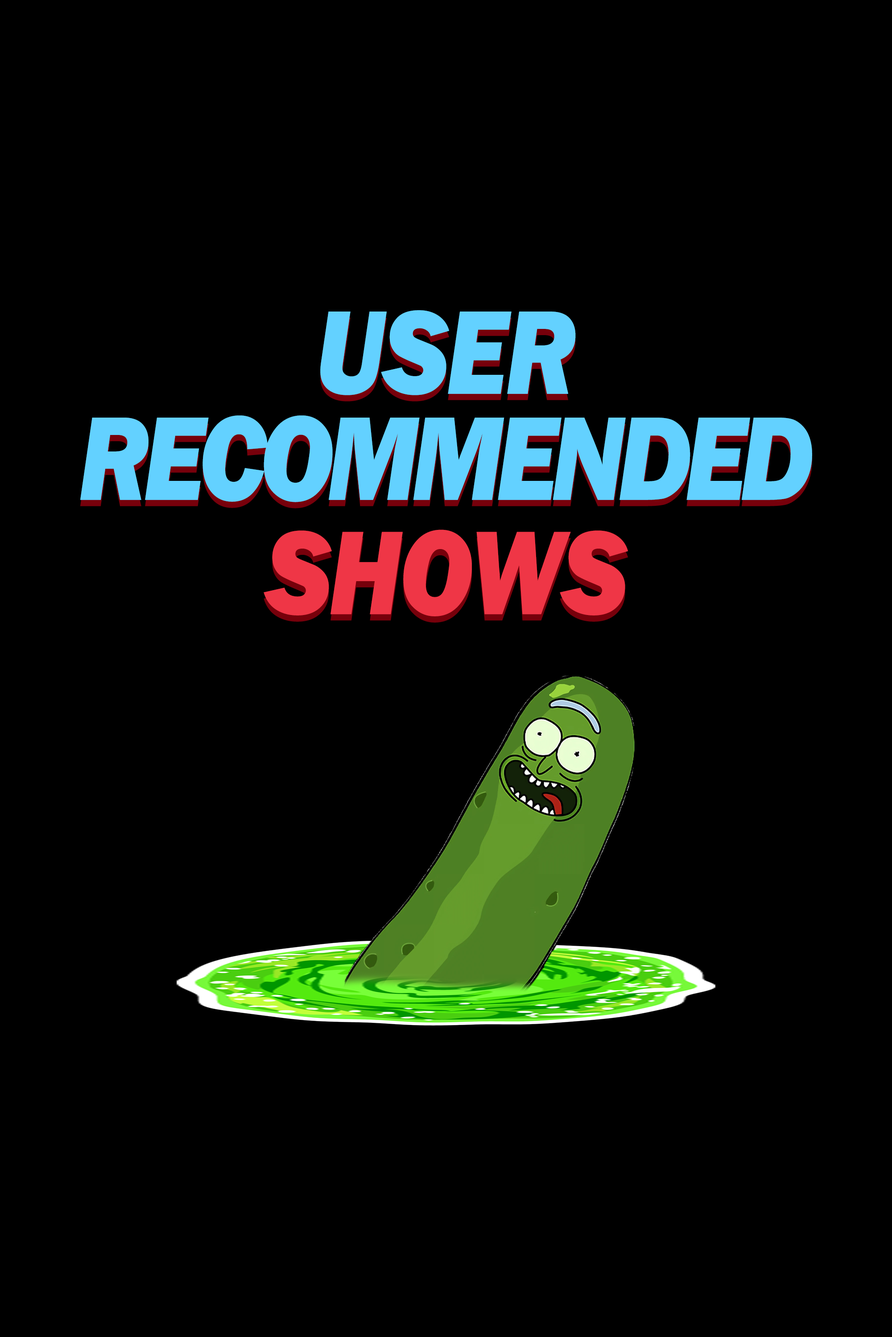
<style>
.page{position:relative;width:892px;height:1337px;background:#000000}
.page>*{position:absolute;margin:0}
.t1{font:123.5px/106px "FranklinGothic-HeavyItalic";letter-spacing:-0.06em;color:#63d1ff;scale:0.87 1}
.t2{font:123.5px/106px "FranklinGothic-HeavyItalic";letter-spacing:-0.02em;color:#63d1ff;scale:0.87 1}
.t3{font:123.5px "FranklinGothic-HeavyItalic";letter-spacing:-0.02em;color:#ef3646;scale:0.87 1}
</style>
<div class="page">
<p class="t1" style="left:80px;top:310px;width:732px;height:192px;text-align:center"><span class="t2">USER <br></span>RECOMMENDED</p>
<p class="t3" style="left:263px;top:530px;width:365px;height:87px">SHOWS</p>
</div>
